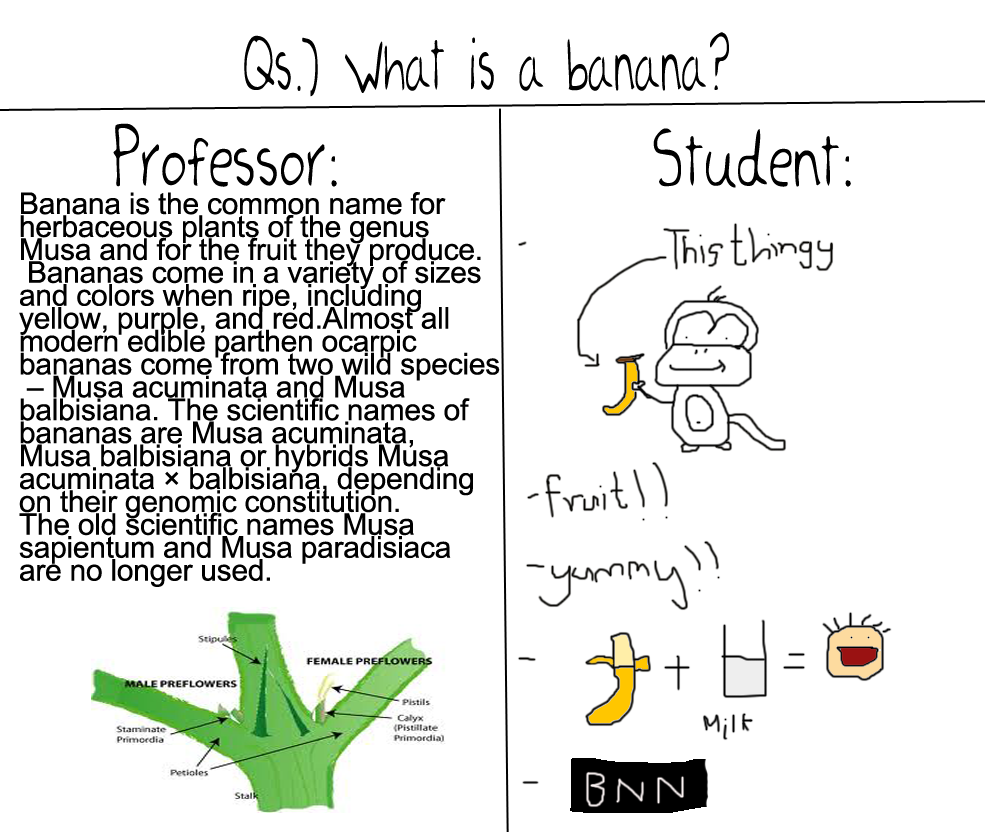
<style>
.page{position:relative;width:985px;height:832px;background:#ffffff}
.page>*{position:absolute;margin:0}
.t1{font:85.2px "AmbersHand-Plain";letter-spacing:-0.009em;color:#000000;scale:0.55 1}
.t2{font:84.7px "AmbersHand-Plain";letter-spacing:-0.009em;color:#000000;scale:0.73 1}
.t3{font:30px/22.9px "ArialMT";letter-spacing:-0.009em;color:#000000}
</style>
<div class="page">
<p class="t1" style="left:244px;top:32px;width:485px;height:65px">Qs.) What is a banana?</p>
<p class="t2" style="left:113px;top:123px;width:738px;height:65px">Professor:          Student:</p>
<p class="t3" style="left:19px;top:192px;width:481px;height:395px">Banana is the common name for <br>herbaceous plants of the genus <br>Musa and for the fruit they produce.<br> Bananas come in a variety of sizes <br>and colors when ripe, including <br>yellow, purple, and red.Almost all <br>modern edible parthen ocarpic <br>bananas come from two wild species<br> – Musa acuminata and Musa <br>balbisiana. The scientific names of <br>bananas are Musa acuminata, <br>Musa balbisiana or hybrids Musa <br>acuminata × balbisiana, depending <br>on their genomic constitution. <br>The old scientific names Musa <br>sapientum and Musa paradisiaca <br>are no longer used.</p>
</div>
